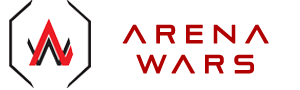
<style>
.page{position:relative;width:300px;height:90px;background:#ffffff}
.page>*{position:absolute;margin:0}
.t1{font:25.3px/30px "PirulenRg-Regular";letter-spacing:0.4em;color:#b00000;font-weight:bold;scale:0.87 1}
</style>
<div class="page">
<p class="t1" style="left:122px;top:24px;width:147px;height:50px;text-align:center">ARENA<br>WARS</p>
</div>
